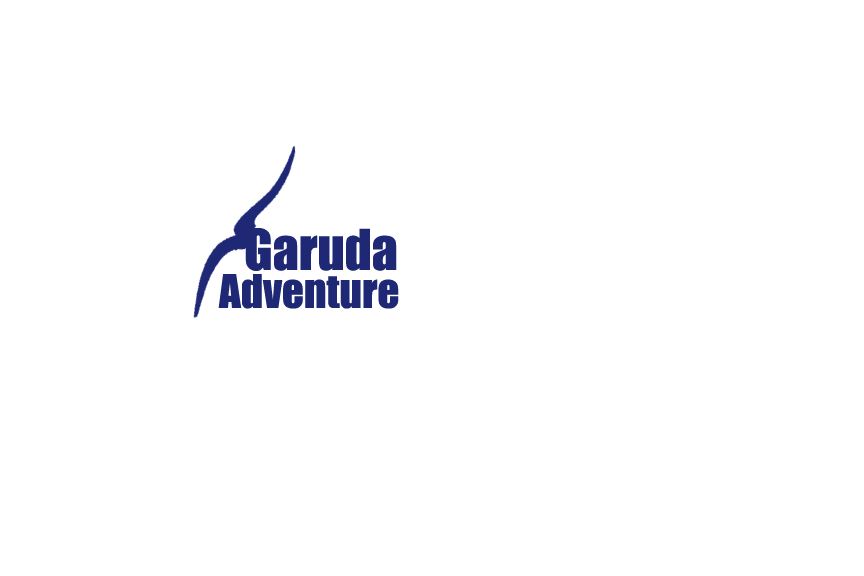
<style>
.page{position:relative;width:864px;height:576px;background:#ffffff}
.page>*{position:absolute;margin:0}
.t1{font:52px "Impact";color:#1e2874}
.t2{font:43px "Impact";color:#1e2874}
</style>
<div class="page">
<p class="t1" style="left:245px;top:228px;width:152px;height:43px">Garuda</p>
<p class="t2" style="left:218px;top:274px;width:181px;height:35px">Adventure</p>
</div>
